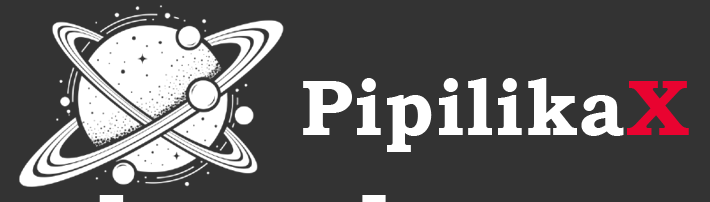
<style>
.page{position:relative;width:710px;height:202px;background:#333333}
.page>*{position:absolute;margin:0}
.t1{font:79.3px "BookmanOldStyle-Bold";letter-spacing:0.02em;color:#ffffff}
.t2{font:79.3px "BookmanOldStyle-Bold";letter-spacing:0.02em;color:#e90330}
</style>
<div class="page">
<p class="t1" style="left:303px;top:78px;width:386px;height:74px">Pipilika<span class="t2">X</span></p>
</div>
